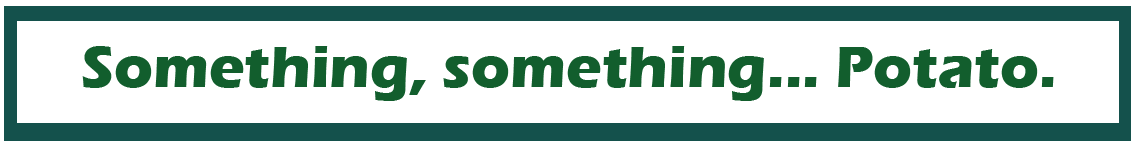
<style>
.page{position:relative;width:1136px;height:150px;background:#ffffff}
.page>*{position:absolute;margin:0}
.t1{font:60px "ErasITC-Bold";color:#125e2d}
</style>
<div class="page">
<p class="t1" style="left:82px;top:46px;width:972px;height:55px">Something, something... Potato.</p>
</div>
